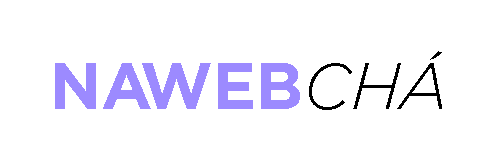
<style>
.page{position:relative;width:500px;height:167px;background:#ffffff}
.page>*{position:absolute;margin:0}
.t1{font:64.8px "Gotham-Bold";color:#9c8aff}
.t2{font:64.8px "Gotham-Bold";letter-spacing:-0.18em;color:#9c8aff}
.t3{font:64.8px "Gotham-LightItalic";color:#000000}
</style>
<div class="page">
<p class="t1" style="left:55px;top:51px;width:387px;height:59px">N<span class="t2">A</span>WEB<span class="t3">CHÁ</span></p>
</div>
